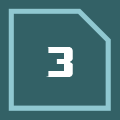
<style>
.page{position:relative;width:120px;height:120px;background:#336166}
.page>*{position:absolute;margin:0}
.t1{font:48px "TransformersMovie";color:#ffffff}
</style>
<div class="page">
<p class="t1" style="left:46px;top:47px;width:27px;height:30px">3</p>
</div>
